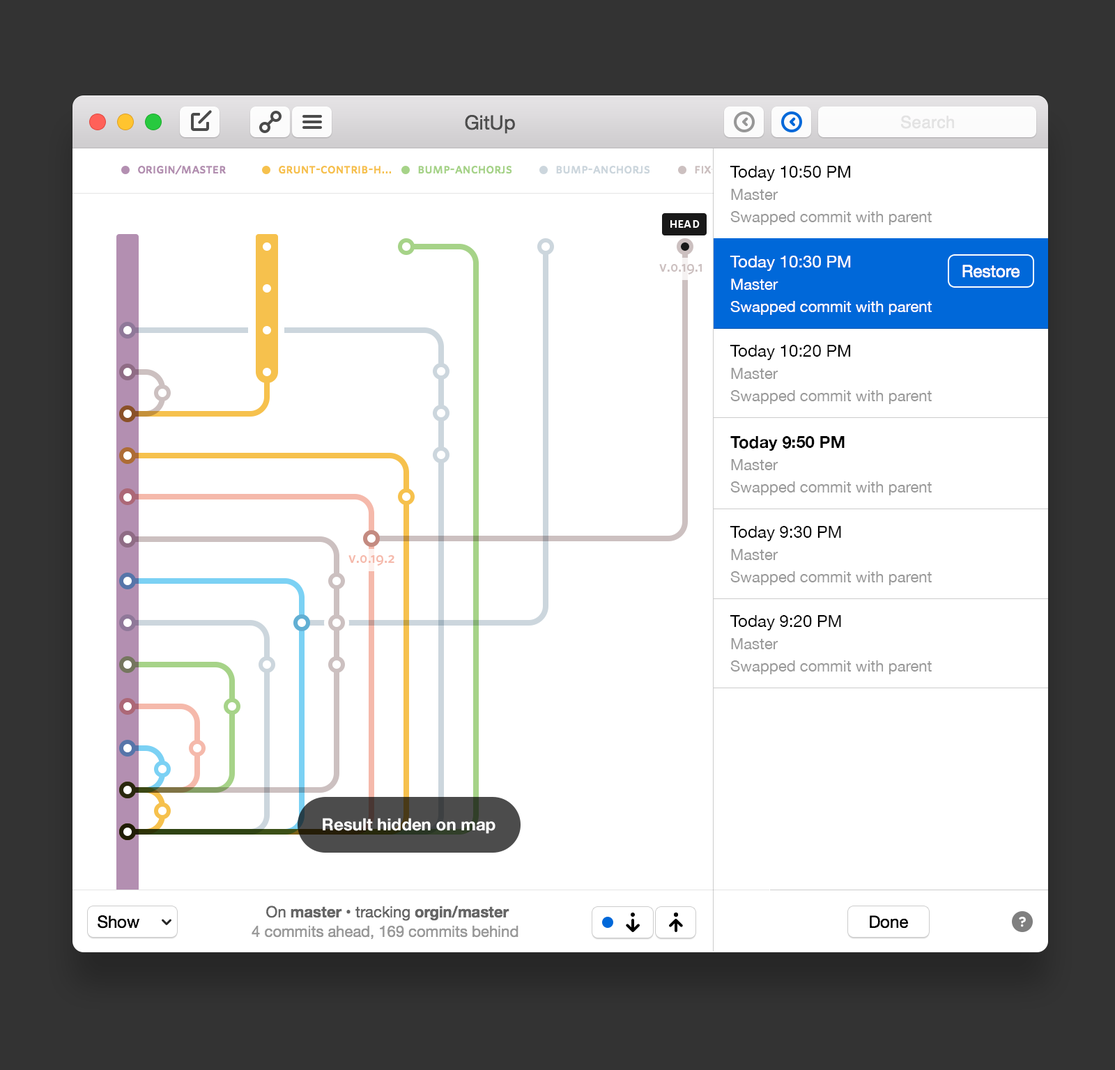
<style>
.page{position:relative;width:1115px;height:1070px;background:#ffffff}
.page>*{position:absolute;margin:0}
.t1{font:19.5px "HelveticaNeue";color:#4d4d4d}
.t2{font:16.7px "Helvetica";letter-spacing:0.02em;color:#e3e3e3}
.t3{font:13.9px "WhitneyHTF-MediumSC";letter-spacing:0.02em;color:#b38fb1}
.t4{font:13.9px "WhitneyHTF-MediumSC";letter-spacing:0.02em;color:#f6c14d}
.t5{font:13.9px "WhitneyHTF-MediumSC";letter-spacing:0.02em;color:#a6d388}
.t6{font:13.9px "WhitneyHTF-MediumSC";letter-spacing:0.02em;color:#ccd6dd}
.t7{font:15.3px/22.3px "HelveticaNeue";color:#999999}
.t8{font:16.7px/22.3px "HelveticaNeue";color:#000000}
.t9{font:15.3px/22.3px "HelveticaNeue";color:#ffffff}
.t10{font:16.7px/22.3px "HelveticaNeue";color:#ffffff}
.t11{font:16.7px "HelveticaNeue";color:#ffffff}
.t12{font:16.7px/22.3px "HelveticaNeue-Bold";color:#000000}
.t13{font:8.4px/19.5px "HelveticaNeue-Bold";color:#ffffff}
.t14{font:15.3px/19.5px "HelveticaNeue";color:#999999}
.t15{font:15.3px/19.5px "HelveticaNeue";color:#666666}
.t16{font:15.3px/19.5px "HelveticaNeue-Bold";color:#666666}
.t17{font:16.7px "HelveticaNeue";color:#000000}
</style>
<div class="page">
<p class="t1" style="left:465px;top:115px;width:50px;height:19px">GitUp</p>
<p class="t2" style="left:900px;top:115px;width:54px;height:14px">Search</p>
<p class="t3" style="left:138px;top:165px;width:88px;height:10px">origin/master</p>
<p class="t4" style="left:279px;top:166px;width:112px;height:8px">grunt-contrib-h...</p>
<p class="t5" style="left:418px;top:166px;width:94px;height:8px">bump-anchorjs</p>
<p class="t6" style="left:556px;top:166px;width:94px;height:8px">bump-anchorjs</p>
<p class="t7" style="left:729px;top:166px;width:202px;height:59px"><span class="t8">Today 10:50 PM<br></span>Master<br>Swapped commit with parent</p>
<p class="t9" style="left:729px;top:256px;width:202px;height:59px"><span class="t10">Today 10:30 PM<br></span>Master<br>Swapped commit with parent</p>
<p class="t11" style="left:962px;top:265px;width:58px;height:13px">Restore</p>
<p class="t7" style="left:729px;top:345px;width:202px;height:59px"><span class="t8">Today 10:20 PM<br></span>Master<br>Swapped commit with parent</p>
<p class="t7" style="left:730px;top:436px;width:201px;height:59px"><span class="t12">Today 9:50 PM<br></span>Master<br>Swapped commit with parent</p>
<p class="t7" style="left:729px;top:526px;width:202px;height:59px"><span class="t8">Today 9:30 PM<br></span>Master<br>Swapped commit with parent</p>
<p class="t7" style="left:729px;top:615px;width:202px;height:59px"><span class="t8">Today 9:20 PM<br></span>Master<br>Swapped commit with parent</p>
<p class="t13" style="left:323px;top:818px;width:172px;height:16px;text-align:center">Result hidden on map</p>
<p class="t14" style="left:251px;top:906px;width:267px;height:34px;text-align:center"><span class="t15">On </span><span class="t16">master</span><span class="t15"> • tracking </span><span class="t16">orgin/master<br></span>4 commits ahead, 169 commits behind</p>
<p class="t17" style="left:98px;top:915px;width:42px;height:14px">Show</p>
<p class="t17" style="left:869px;top:915px;width:39px;height:14px">Done</p>
</div>
